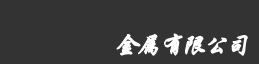
<style>
.page{position:relative;width:259px;height:64px;background:#333333}
.page>*{position:absolute;margin:0}
.t1{font:24px "STXingkai";letter-spacing:-0.1em;color:#fefefe;font-weight:bold;font-style:italic}
</style>
<div class="page">
<p class="t1" style="left:116px;top:33px;width:132px;height:23px">金属有限公司</p>
</div>
